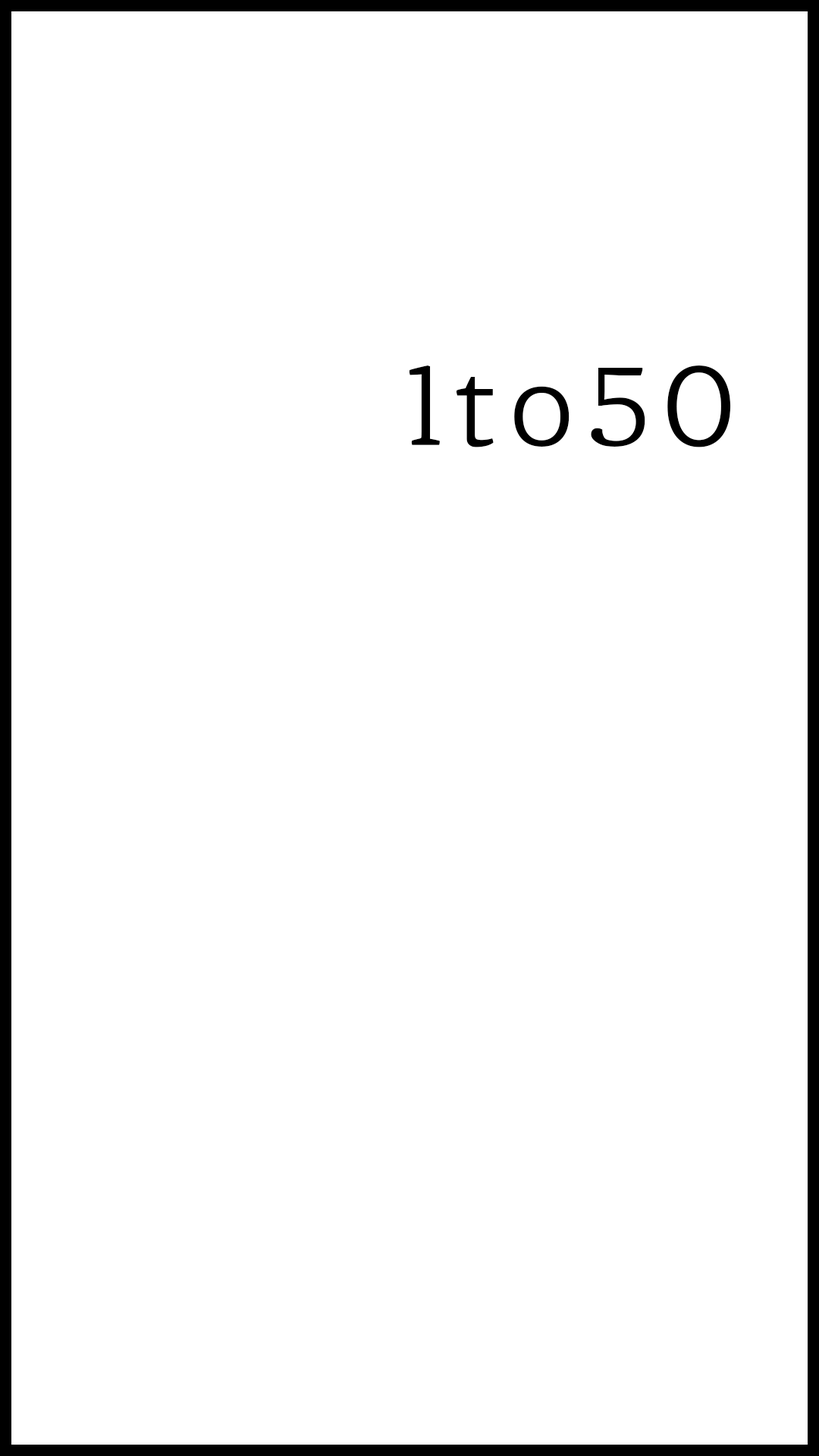
<style>
.page{position:relative;width:819px;height:1456px;background:#ffffff}
.page>*{position:absolute;margin:0}
.t1{font:113.7px "MARUBuriBeta-Regular";letter-spacing:0.1em;color:#000000}
</style>
<div class="page">
<p class="t1" style="left:409px;top:366px;width:322px;height:81px">1to50</p>
</div>
